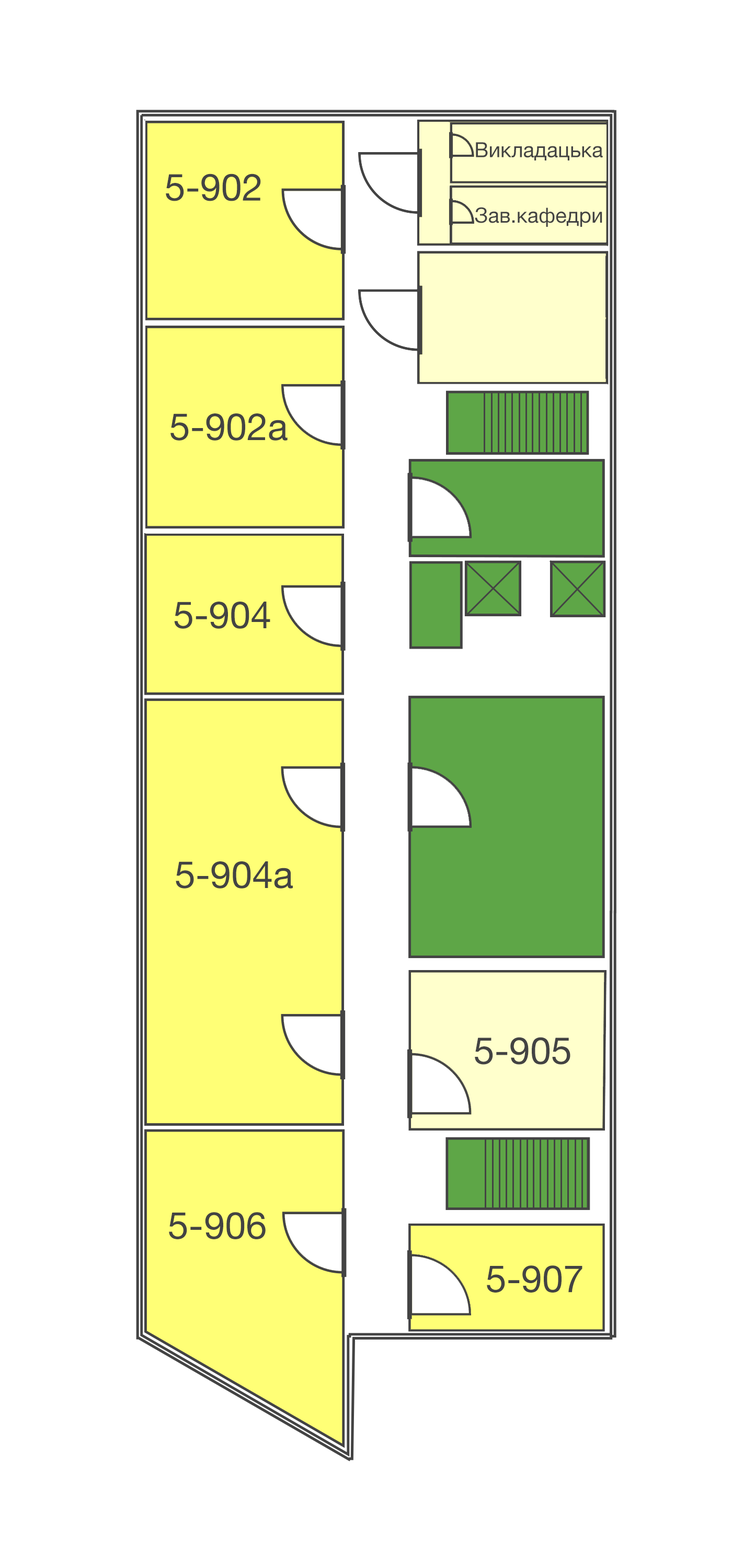
<style>
.page{position:relative;width:732px;height:1568px;background:#ffffff}
.page>*{position:absolute;margin:0}
.t1{font:20.9px "HelveticaNeue";color:#434343}
.t2{font:37.6px "HelveticaNeue";color:#434343}
</style>
<div class="page">
<p class="t1" style="left:476px;top:142px;width:127px;height:18px">Викладацька</p>
<p class="t2" style="left:166px;top:174px;width:95px;height:27px">5-902</p>
<p class="t1" style="left:475px;top:207px;width:127px;height:20px">Зав.кафедри</p>
<p class="t2" style="left:170px;top:413px;width:117px;height:28px">5-902а</p>
<p class="t2" style="left:174px;top:602px;width:96px;height:27px">5-904</p>
<p class="t2" style="left:176px;top:861px;width:117px;height:28px">5-904а</p>
<p class="t2" style="left:475px;top:1037px;width:95px;height:28px">5-905</p>
<p class="t2" style="left:169px;top:1212px;width:97px;height:27px">5-906</p>
<p class="t2" style="left:487px;top:1265px;width:95px;height:28px">5-907</p>
</div>
